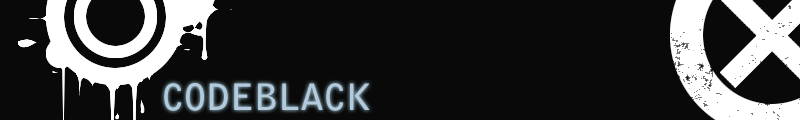
<style>
.page{position:relative;width:800px;height:120px;background:#090909}
.page>*{position:absolute;margin:0}
.t1{font:36px "BellGothicStd-Bold";color:#b3c9dc}
</style>
<div class="page">
<p class="t1" style="left:164px;top:83px;width:206px;height:28px">CODEBLACK</p>
</div>
